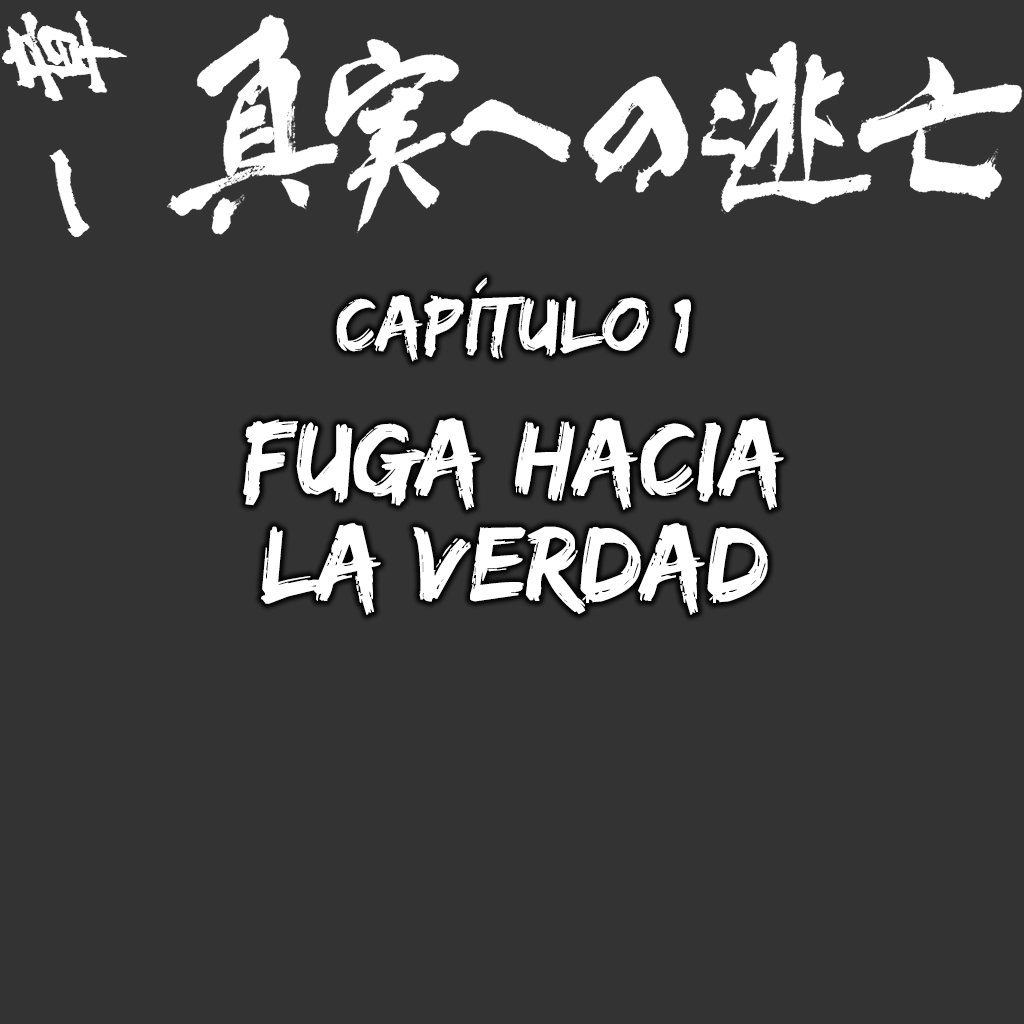
<style>
.page{position:relative;width:1024px;height:1024px;background:#333333}
.page>*{position:absolute;margin:0}
.t1{font:80px "EdoSZ";color:#ffffff}
.t2{font:109.9px/105.8px "EdoSZ";color:#ffffff}
</style>
<div class="page">
<p class="t1" style="left:336px;top:277px;width:355px;height:85px">Capítulo 1</p>
<p class="t2" style="left:243px;top:418px;width:541px;height:197px;text-align:center">FUGA HACIA<br>LA VERDAD</p>
</div>
